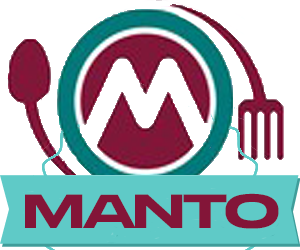
<style>
.page{position:relative;width:300px;height:250px;background:#ffffff}
.page>*{position:absolute;margin:0}
.t1{font:48px "StretchProRegular";letter-spacing:-0.06em;color:#831538}
</style>
<div class="page">
<p class="t1" style="left:25px;top:193px;width:254px;height:36px">MANTO</p>
</div>
